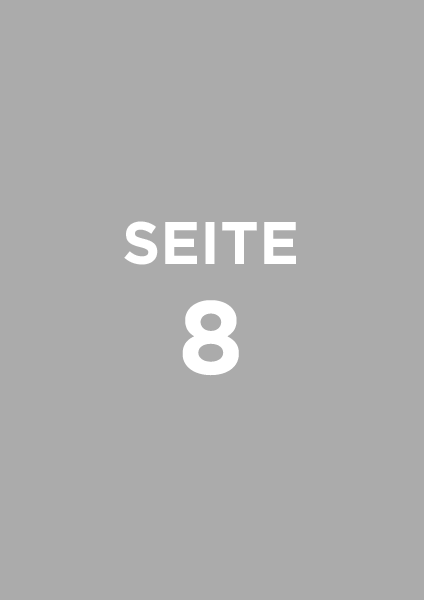
<style>
.page{position:relative;width:424px;height:600px;background:#ababab}
.page>*{position:absolute;margin:0}
.t1{font:60px/110.4px "Gotham-Bold";color:#ffffff;text-transform:uppercase}
.t2{font:104px/110.4px "Gotham-Bold";color:#ffffff;text-transform:uppercase}
</style>
<div class="page">
<p class="t1" style="left:124px;top:221px;width:172px;height:155px;text-align:center">Seite<br><span class="t2">8</span></p>
</div>
